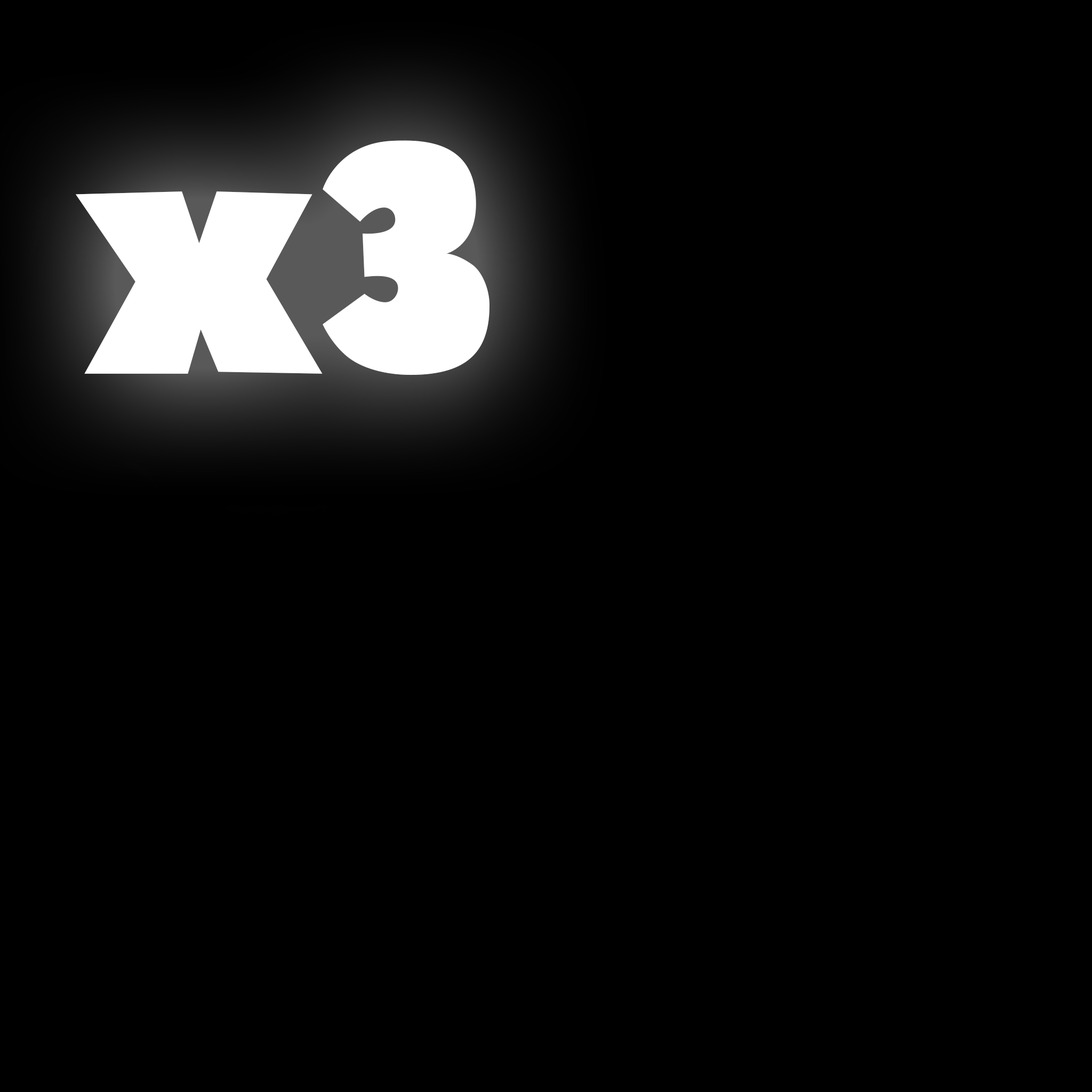
<style>
.page{position:relative;width:1092px;height:1092px;background:#000000}
.page>*{position:absolute;margin:0}
.t1{font:314.1px "Bumpo";color:#ffffff}
.t2{font:239.4px "Bumpo";color:#ffffff}
</style>
<div class="page">
<p class="t1" style="left:76px;top:140px;width:413px;height:235px">x3<span class="t2">#3</span></p>
</div>
